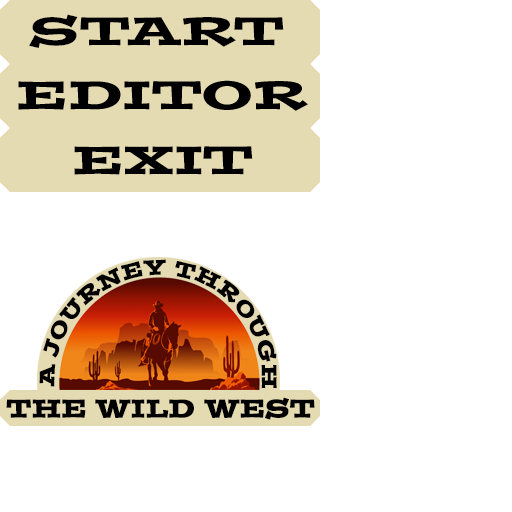
<style>
.page{position:relative;width:512px;height:512px;background:#ffffff}
.page>*{position:absolute;margin:0}
.t1{font:39.5px "PostinoStd";color:#000000;scale:1.32 1}
.t2{font:20.8px "PostinoStd";color:#000000;font-weight:bold}
.t3{font:25px "PostinoStd";color:#000000;font-weight:bold}
</style>
<div class="page">
<p class="t1" style="left:29px;top:14px;width:255px;height:35px">START</p>
<p class="t1" style="left:74px;top:146px;width:179px;height:29px">EXIT</p>
<p class="t2" style="left:39px;top:259px;width:238px;height:130px;rotate:128deg">A JOURNEY THROUGH</p>
<p class="t3" style="left:6px;top:397px;width:309px;height:23px">THE WILD WEST</p>
</div>
